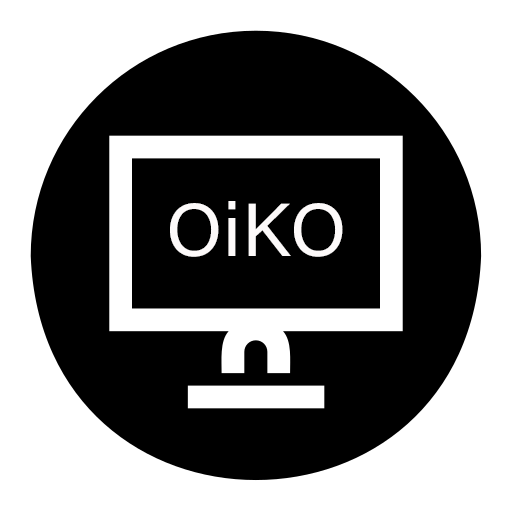
<style>
.page{position:relative;width:512px;height:512px;background:#000000}
.page>*{position:absolute;margin:0}
.t1{font:75px "AcuminConcept-Regular";letter-spacing:0.01em;color:#fdfafa;font-style:italic}
</style>
<div class="page">
<p class="t1" style="left:170px;top:201px;width:173px;height:56px">OiKO</p>
</div>
